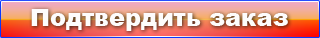
<style>
.page{position:relative;width:320px;height:38px}
.page>*{position:absolute;margin:0}
.t1{font:24px "Arial-Black";color:#fdfcfc}
</style>
<div class="page">
<p class="t1" style="left:31px;top:9px;width:257px;height:22px">Подтвердить заказ</p>
</div>
